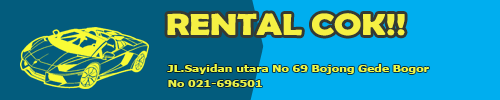
<style>
.page{position:relative;width:500px;height:100px;background:#00aeef}
.page>*{position:absolute;margin:0}
.t1{font:30.3px "BerlinSansFBDemi-Bold";color:#f6f043;scale:1.21 1}
.t2{font:10px "Tahoma-Bold";color:#eef945;scale:1.21 1}
.t3{font:10px "Tahoma-Bold";color:#e8f24b;scale:1.21 1}
</style>
<div class="page">
<p class="t1" style="left:167px;top:13px;width:238px;height:23px">RENTAL COK!!</p>
<p class="t2" style="left:167px;top:64px;width:262px;height:10px">JL.Sayidan utara No 69 Bojong Gede Bogor</p>
<p class="t3" style="left:168px;top:80px;width:94px;height:7px">No 021-696501</p>
</div>
